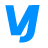
<style>
.page{position:relative;width:48px;height:48px;background:#ffffff}
.page>*{position:absolute;margin:0}
.t1{font:41px "DejaVuSans-Bold";color:#0090ff;font-style:italic}
.t2{font:40px "DejaVuSans-Bold";color:#0090ff;font-style:italic}
</style>
<div class="page">
<p class="t1" style="left:5px;top:5px;width:32px;height:31px">V</p>
<p class="t2" style="left:19px;top:5px;width:21px;height:38px">J</p>
</div>
